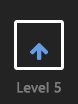
<style>
.page{position:relative;width:78px;height:104px;background:#232323}
.page>*{position:absolute;margin:0}
.t1{font:14px "SegoeUI";color:#7c7c7c;font-weight:bold}
</style>
<div class="page">
<p class="t1" style="left:17px;top:82px;width:44px;height:11px">Level 5</p>
</div>
